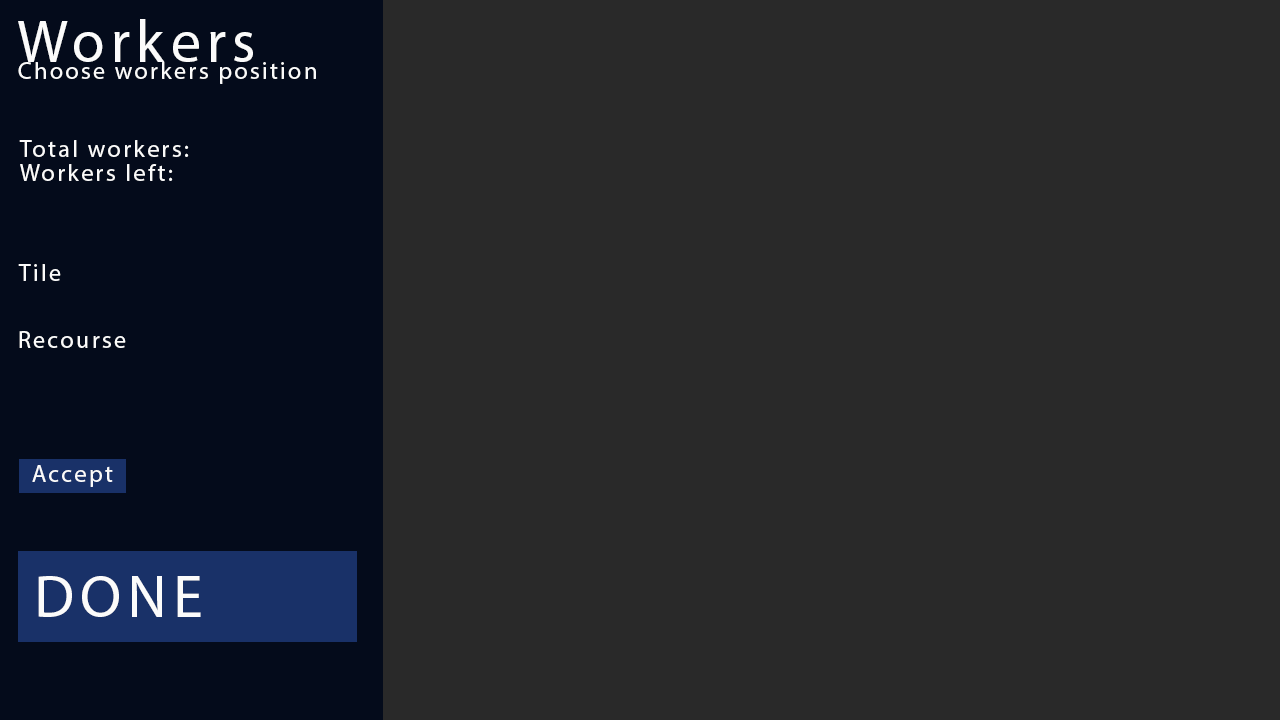
<style>
.page{position:relative;width:1280px;height:720px;background:#292929}
.page>*{position:absolute;margin:0}
.t1{font:60px "MyriadPro-Regular";letter-spacing:0.1em;color:#fbfbfb}
.t2{font:24px "MyriadPro-Regular";letter-spacing:0.1em;color:#fbfbfb}
.t3{font:24px/24px "MyriadPro-Regular";letter-spacing:0.1em;color:#fbfbfb}
</style>
<div class="page">
<p class="t1" style="left:18px;top:19px;width:235px;height:43px">Workers</p>
<p class="t2" style="left:18px;top:62px;width:298px;height:22px">Choose workers position</p>
<p class="t3" style="left:19px;top:140px;width:170px;height:41px">Total workers:<br>Workers left:</p>
<p class="t2" style="left:18px;top:264px;width:43px;height:17px">Tile</p>
<p class="t2" style="left:19px;top:331px;width:107px;height:17px">Recourse</p>
<p class="t2" style="left:32px;top:465px;width:81px;height:22px">Accept</p>
<p class="t1" style="left:38px;top:576px;width:163px;height:41px">DONE</p>
</div>
